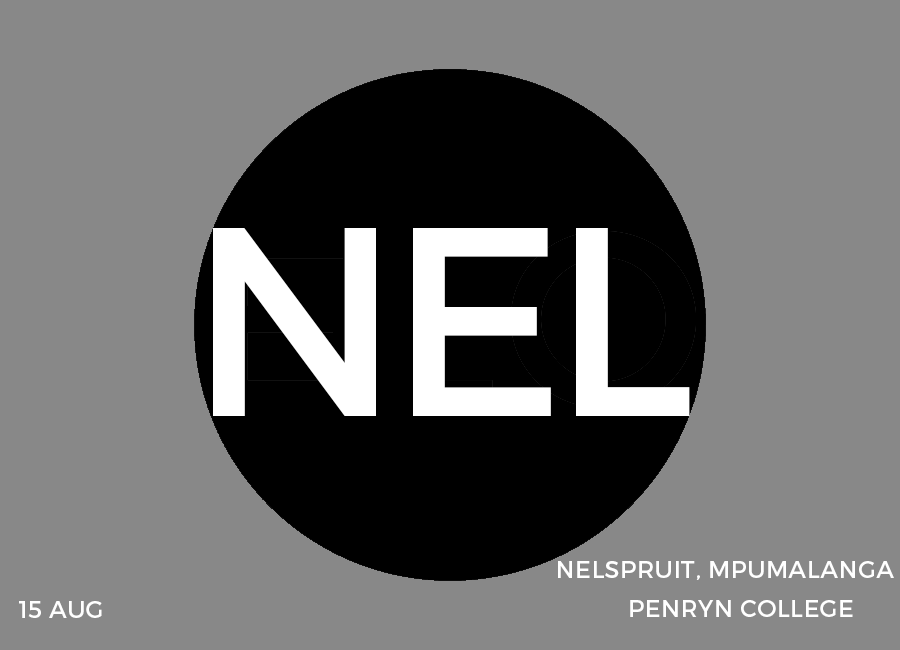
<style>
.page{position:relative;width:900px;height:650px;background:#888888}
.page>*{position:absolute;margin:0}
.t1{font:269px "Montserrat-Regular";letter-spacing:-0.05em;color:#ffffff}
.t2{font:24px "Montserrat-Regular";letter-spacing:0.02em;color:#ffffff}
</style>
<div class="page">
<p class="t1" style="left:213px;top:228px;width:477px;height:188px">NEL</p>
<p class="t2" style="left:558px;top:561px;width:336px;height:19px">NELSPRUIT, MPUMALANGA</p>
<p class="t2" style="left:19px;top:601px;width:83px;height:17px">15 AUG</p>
<p class="t2" style="left:630px;top:600px;width:223px;height:17px">PENRYN COLLEGE</p>
</div>
